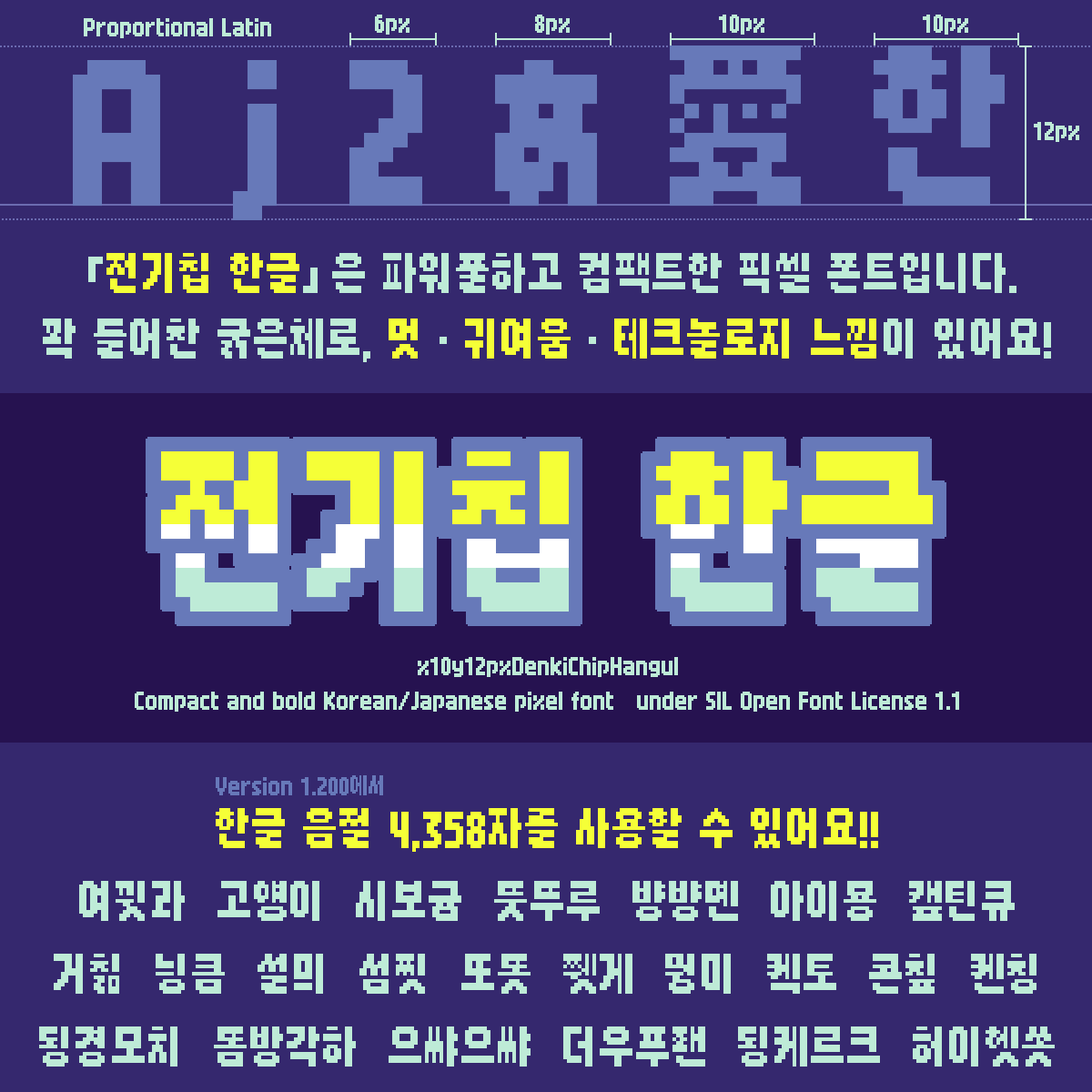
<style>
.page{position:relative;width:1092px;height:1092px;background:#35286e}
.page>*{position:absolute;margin:0}
.t1{font:174.7px "x10y12pxDenkiChipHangul";color:#6779b9}
.t2{font:43.7px/65.5px "x10y12pxDenkiChipHangul";color:#beebd7}
.t3{font:43.7px/65.5px "x10y12pxDenkiChipHangul";color:#f5ff37}
.t4{font:174.7px "x10y12pxDenkiChipHangul"}
.t5{font:21.8px/34.6px "x10y12pxDenkiChipHangul";color:#beebd7}
.t6{font:21.8px "x10y12pxDenkiChipHangul";color:#6779b9}
.t7{font:43.7px "x10y12pxDenkiChipHangul";color:#f5ff37}
.t8{font:43.7px/72.8px "x10y12pxDenkiChipHangul";color:#beebd7}
</style>
<div class="page">
<p class="t1" style="left:73px;top:45px;width:932px;height:175px">A j 2 あ 愛 한</p>
<p class="t2" style="left:43px;top:253px;width:1008px;height:109px;text-align:center">「<span class="t3">전기칩 한글</span>」은 파워풀하고 컴팩트한 픽셀 폰트입니다.<br>꽉 들어찬 굵은체로, <span class="t3">멋</span> · <span class="t3">귀여움</span> · <span class="t3">테크놀로지 느낌</span>이 있어요!</p>
<p class="t4" style="left:161px;top:451px;width:772px;height:161px">전기칩 한글</p>
<p class="t5" style="left:135px;top:657px;width:824px;height:55px;text-align:center">x10y12pxDenkiChipHangul<br>Compact and bold Korean/Japanese pixel font   under SIL Open Font License 1.1</p>
<p class="t6" style="left:216px;top:775px;width:167px;height:20px">Version 1.200에서</p>
<p class="t7" style="left:216px;top:808px;width:662px;height:44px">한글 음절 4,358자를 사용할 수 있어요!!</p>
<p class="t8" style="left:39px;top:881px;width:1016px;height:186px;text-align:center">여뀟과  고얭이  시보귬  뚯뚜루  뱡뱡몐  아이묭  캪틴큐<br>거칢  닁큼  설믜  섬찟  또똣  쮓게  뭥미  퀙토  콘칲  퀜칭<br>됭경모치  똠방각하  으쌰으쌰  더우푸좬  됭케르크  허이헷쏫</p>
</div>
